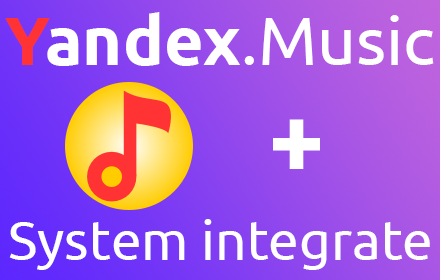
<style>
.page{position:relative;width:440px;height:280px}
.page>*{position:absolute;margin:0}
.t1{font:68px "Ubuntu";color:#ffffff}
.t2{font:68px "Ubuntu-Bold";color:#ff3333}
.t3{font:68px "Ubuntu-Bold";color:#ffffff}
.t4{font:100px "Ubuntu-Bold";color:#ffffff}
.t5{font:55px "Ubuntu";color:#ffffff}
</style>
<div class="page">
<p class="t1" style="left:5px;top:12px;width:429px;height:54px"><span class="t2">Y</span><span class="t3">andex</span>.Music</p>
<p class="t4" style="left:273px;top:119px;width:47px;height:50px">+</p>
<p class="t5" style="left:9px;top:219px;width:421px;height:51px">System integrate</p>
</div>
